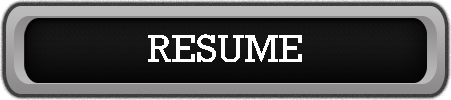
<style>
.page{position:relative;width:451px;height:100px}
.page>*{position:absolute;margin:0}
.t1{font:39.8px "Rockwell";color:#ffffff}
</style>
<div class="page">
<p class="t1" style="left:148px;top:34px;width:154px;height:28px">RESUME</p>
</div>
